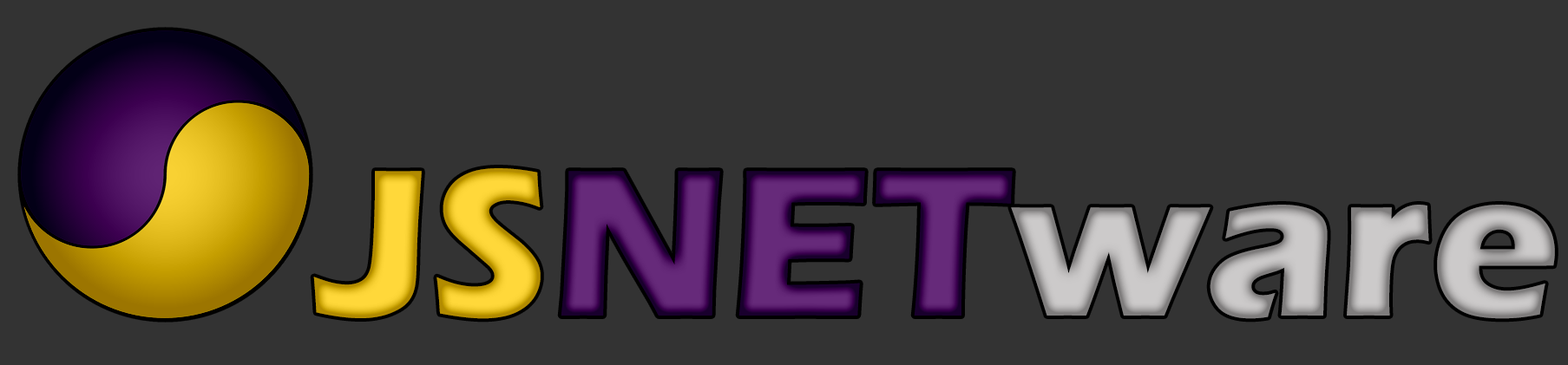
<style>
.page{position:relative;width:1568px;height:365px;background:#333333}
.page>*{position:absolute;margin:0}
.t1{font:216.9px "ErasITC-Bold"}
</style>
<div class="page">
<p class="t1" style="left:313px;top:168px;width:1242px;height:151px">JSNETware</p>
</div>
